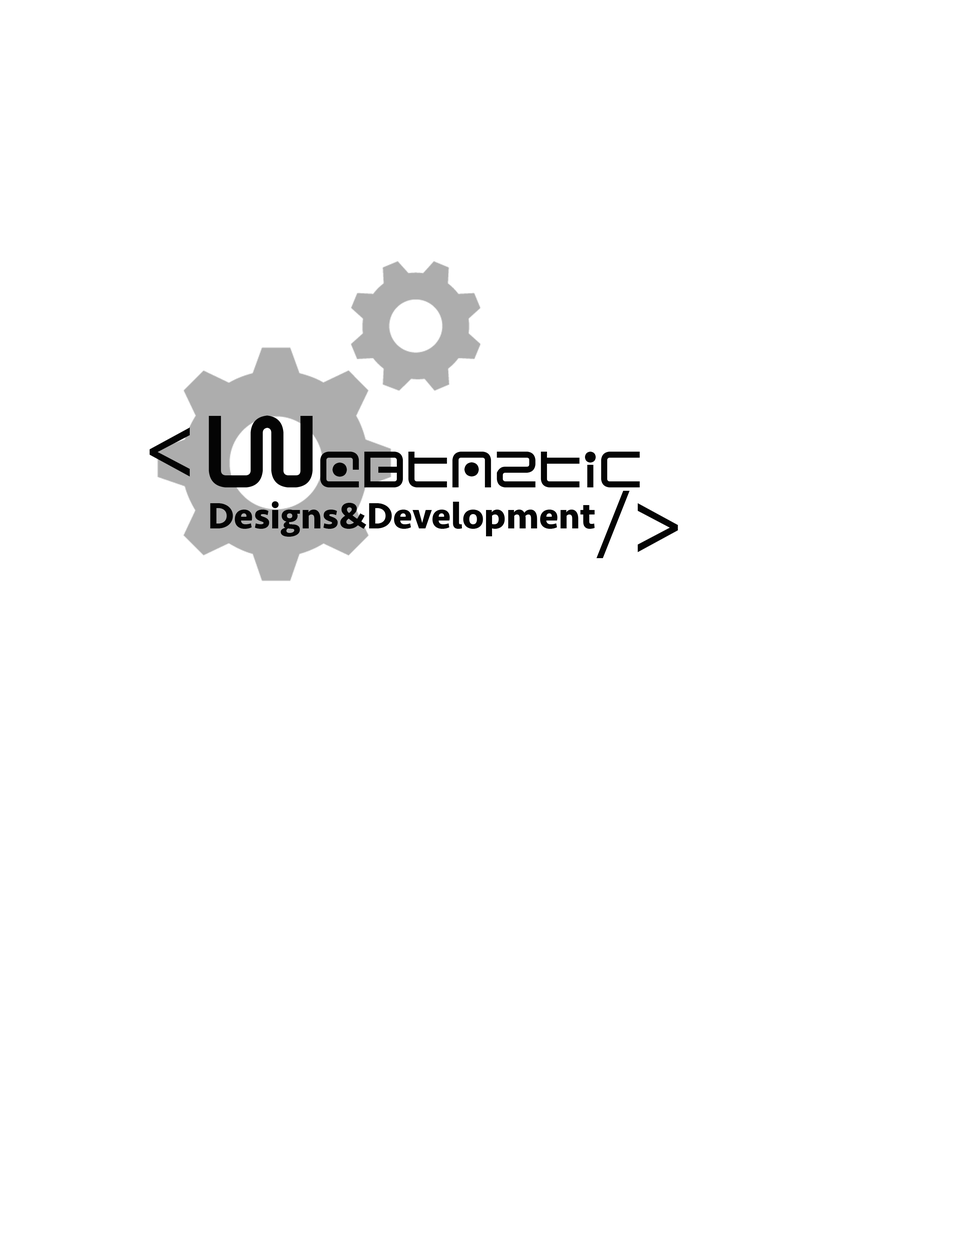
<style>
.page{position:relative;width:960px;height:1242px;background:#ffffff}
.page>*{position:absolute;margin:0}
.t1{font:56.5px "Sagan";color:#040404}
.t2{font:112.9px "Sagan";color:#040404}
.t3{font:94.1px "SukhumvitSet-Medium";color:#040404}
.t4{font:37.6px "Seravek-Bold";color:#040404}
</style>
<div class="page">
<p class="t1" style="left:209px;top:416px;width:431px;height:71px"><span class="t2">w</span>ebtaztic</p>
<p class="t3" style="left:149px;top:428px;width:41px;height:49px">&lt;</p>
<p class="t3" style="left:596px;top:491px;width:82px;height:67px">/&gt;</p>
<p class="t4" style="left:210px;top:501px;width:385px;height:36px">Designs&amp;Development</p>
</div>
